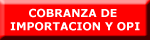
<style>
.page{position:relative;width:150px;height:40px;background:#ff0000}
.page>*{position:absolute;margin:0}
.t1{font:11px "Verdana-Bold";color:#ffffff}
.t2{font:9px "Verdana-Bold";color:#ffffff}
</style>
<div class="page">
<p class="t1" style="left:10px;top:8px;width:130px;height:23px"><span class="t2">      </span>COBRANZA DE <br>IMPORTACION Y OPI</p>
</div>
